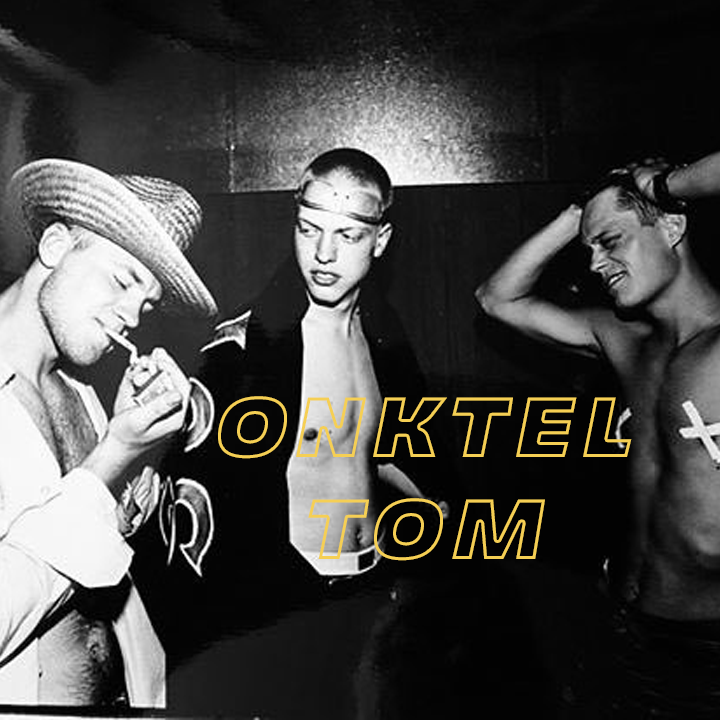
<style>
.page{position:relative;width:720px;height:720px}
.page>*{position:absolute;margin:0}
.t1{font:85px "Majoris-Italic";letter-spacing:0.1em;text-transform:uppercase}
</style>
<div class="page">
<p class="t1" style="left:218px;top:396px;width:414px;height:165px;text-align:center">onktel tom</p>
</div>
